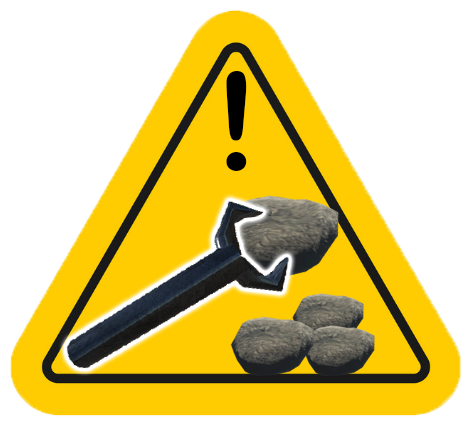
<style>
.page{position:relative;width:471px;height:426px;background:#ffffff}
.page>*{position:absolute;margin:0}
.t1{font:133.6px "ArialRoundedMTBold";color:#000000}
</style>
<div class="page">
<p class="t1" style="left:226px;top:71px;width:21px;height:100px">!</p>
</div>
